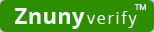
<style>
.page{position:relative;width:154px;height:32px;background:#2d8e00}
.page>*{position:absolute;margin:0}
.t1{font:8px "OpenSans";color:#f5f5f5}
.t2{font:16px "OpenSans";letter-spacing:0.105em;color:#f5f5f5}
.t3{font:22px "OpenSans-Bold";letter-spacing:0.015em;color:#f5f5f5}
</style>
<div class="page">
<p class="t1" style="left:134px;top:4px;width:12px;height:7px">TM</p>
<p class="t2" style="left:15px;top:8px;width:122px;height:21px"><span class="t3">Znuny </span>verify</p>
</div>
